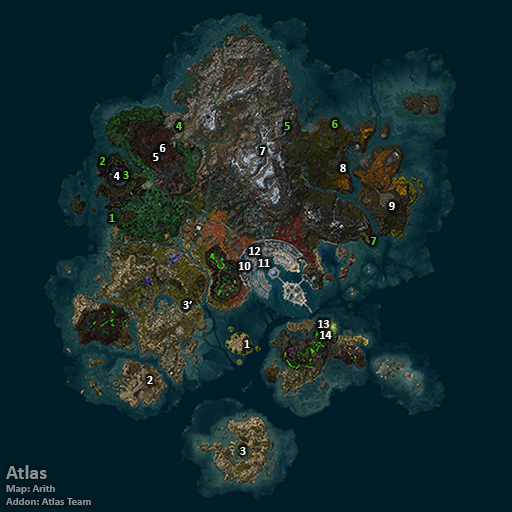
<style>
.page{position:relative;width:512px;height:512px;background:#001d28}
.page>*{position:absolute;margin:0}
.t1{font:12px "Calibri-Bold";color:#66cc33}
.t2{font:12px "Calibri-Bold";color:#ffffff}
.t3{font:11px "Calibri-Bold";color:#8d9396}
.t4{font:20px "Calibri-Bold";color:#8d9396}
</style>
<div class="page">
<p class="t1" style="left:176px;top:122px;width:6px;height:8px">4</p>
<p class="t1" style="left:284px;top:122px;width:6px;height:8px">5</p>
<p class="t1" style="left:332px;top:120px;width:6px;height:8px">6</p>
<p class="t2" style="left:159px;top:144px;width:7px;height:8px">6</p>
<p class="t2" style="left:259px;top:147px;width:7px;height:8px">7</p>
<p class="t1" style="left:99px;top:157px;width:7px;height:8px">2</p>
<p class="t2" style="left:153px;top:153px;width:6px;height:8px">5</p>
<p class="t2" style="left:113px;top:172px;width:7px;height:8px">4</p>
<p class="t1" style="left:123px;top:171px;width:6px;height:8px">3</p>
<p class="t2" style="left:340px;top:164px;width:6px;height:8px">8</p>
<p class="t2" style="left:389px;top:202px;width:6px;height:8px">9</p>
<p class="t1" style="left:109px;top:214px;width:6px;height:8px">1</p>
<p class="t1" style="left:370px;top:237px;width:7px;height:8px">7</p>
<p class="t2" style="left:249px;top:247px;width:12px;height:8px">12</p>
<p class="t2" style="left:239px;top:262px;width:12px;height:8px">10</p>
<p class="t2" style="left:258px;top:259px;width:12px;height:8px">11</p>
<p class="t2" style="left:183px;top:301px;width:9px;height:8px">3’</p>
<p class="t2" style="left:318px;top:320px;width:12px;height:8px">13</p>
<p class="t2" style="left:244px;top:340px;width:6px;height:8px">1</p>
<p class="t2" style="left:320px;top:331px;width:12px;height:8px">14</p>
<p class="t2" style="left:147px;top:376px;width:6px;height:8px">2</p>
<p class="t2" style="left:240px;top:447px;width:6px;height:8px">3</p>
<p class="t3" style="left:6px;top:465px;width:85px;height:40px"><span class="t4">Atlas<br></span>Map: Arith<br>Addon: Atlas Team</p>
</div>
